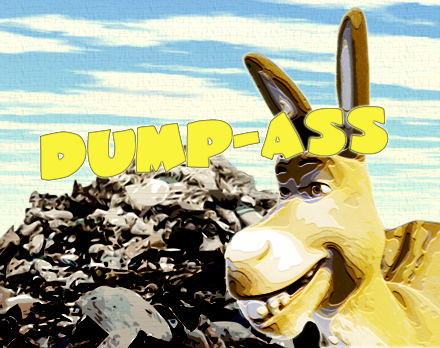
<style>
.page{position:relative;width:440px;height:348px}
.page>*{position:absolute;margin:0}
.t1{font:48px "JuneBug";color:#faf33b}
</style>
<div class="page">
<p class="t1" style="left:40px;top:106px;width:349px;height:75px">DUMP-ASS</p>
</div>
